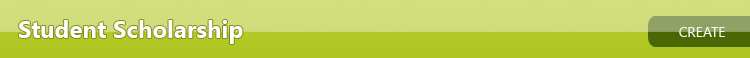
<style>
.page{position:relative;width:750px;height:58px}
.page>*{position:absolute;margin:0}
.t1{font:24px "SegoeUI-Bold";color:#fefefe}
.t2{font:14px "SegoeUI";color:#f6f7f1}
</style>
<div class="page">
<p class="t1" style="left:19px;top:20px;width:224px;height:24px">Student Scholarship</p>
<p class="t2" style="left:679px;top:27px;width:46px;height:10px">CREATE</p>
</div>
